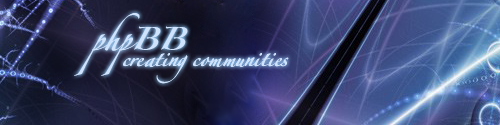
<style>
.page{position:relative;width:500px;height:125px}
.page>*{position:absolute;margin:0}
.t1{font:33.3px/16.7px "ZapfinoForteLTPro";color:#d0e3fd}
.t2{font:50px/25px "ZapfinoForteLTPro";color:#d0e3fd}
.t3{font:50px/16.7px "ZapfinoForteLTPro";color:#d0e3fd}
</style>
<div class="page">
<p class="t1" style="left:74px;top:13px;width:215px;height:71px"><span class="t2">       </span><span class="t3">  phpBB<br></span>                  creating communities</p>
</div>
